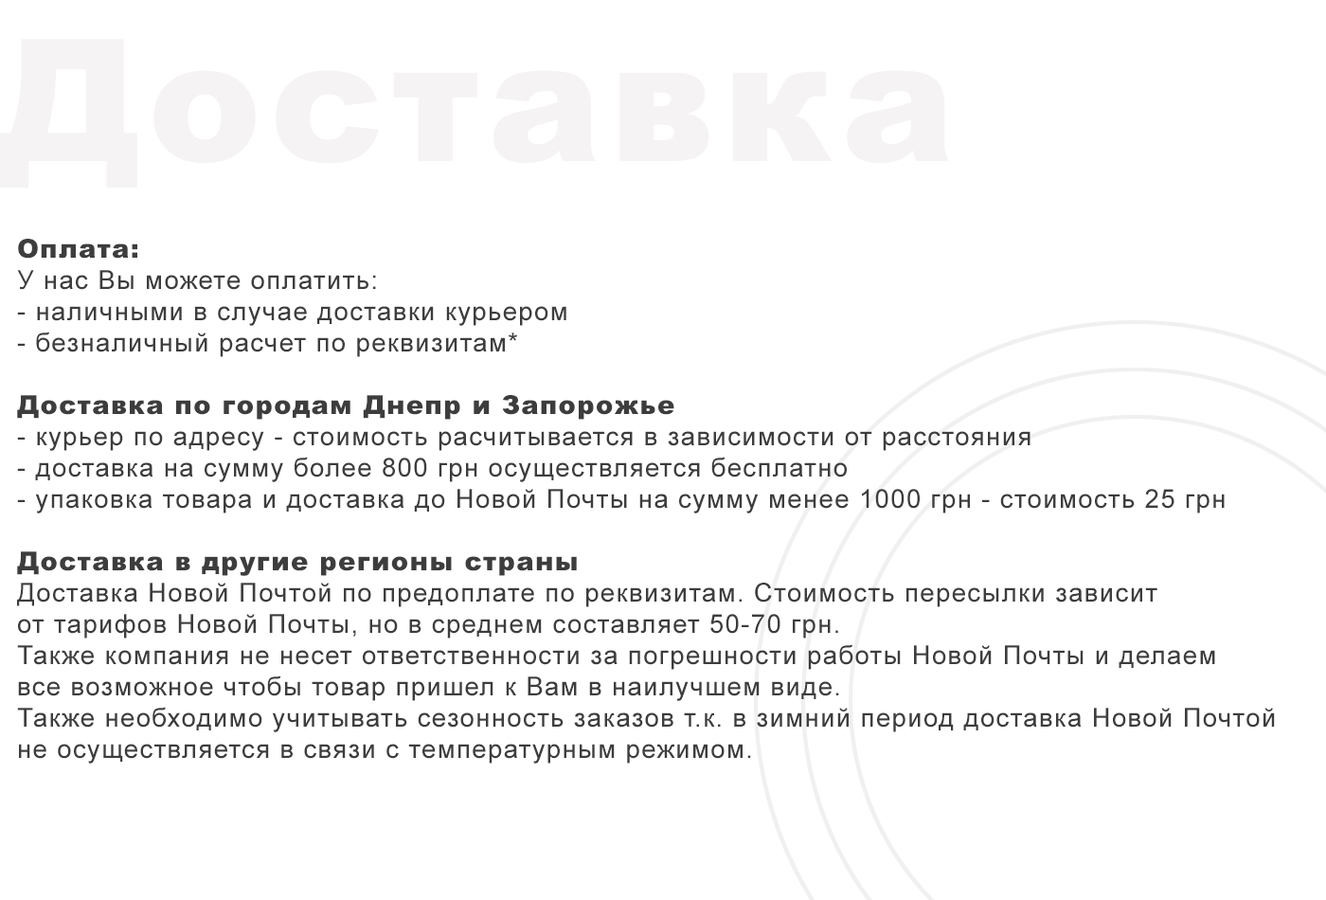
<style>
.page{position:relative;width:1326px;height:900px;background:#ffffff}
.page>*{position:absolute;margin:0}
.t1{font:170.4px "Arial-Black";letter-spacing:0.05em;color:#f5f3f4}
.t2{font:26px "ArialMT";letter-spacing:0.05em;color:#3d3d3d}
.t3{font:26px/204.5px "Arial-Black";letter-spacing:0.05em;color:#3d3d3d}
.t4{font:26px "Arial-Black";letter-spacing:0.05em;color:#3d3d3d}
</style>
<div class="page">
<p class="t1" style="left:0px;top:39px;width:949px;height:148px">Доставка</p>
<p class="t2" style="left:17px;top:239px;width:1257px;height:524px"><span class="t3">Оплата:<br></span>У нас Вы можете оплатить:<br>- наличными в случае доставки курьером<br>- безналичный расчет по реквизитам*<br><br><span class="t4">Доставка по городам Днепр и Запорожье<br></span>- курьер по адресу - стоимость расчитывается в зависимости от расстояния<br>- доставка на сумму более 800 грн осуществляется бесплатно<br>- упаковка товара и доставка до Новой Почты на сумму менее 1000 грн - стоимость 25 грн<br><br><span class="t4">Доставка в другие регионы страны<br></span>Доставка Новой Почтой по предоплате по реквизитам. Стоимость пересылки зависит <br>от тарифов Новой Почты, но в среднем составляет 50-70 грн.<br>Также компания не несет ответственности за погрешности работы Новой Почты и делаем <br>все возможное чтобы товар пришел к Вам в наилучшем виде.<br>Также необходимо учитывать сезонность заказов т.к. в зимний период доставка Новой Почтой <br>не осуществляется в связи с температурным режимом.</p>
</div>
